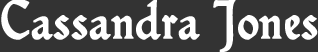
<style>
.page{position:relative;width:318px;height:52px;background:#333333}
.page>*{position:absolute;margin:0}
.t1{font:54.2px "Hamlet-Tertia18";color:#ffffff;font-weight:bold}
</style>
<div class="page">
<p class="t1" style="left:1px;top:0px;width:317px;height:53px">Cassandra Jones</p>
</div>
